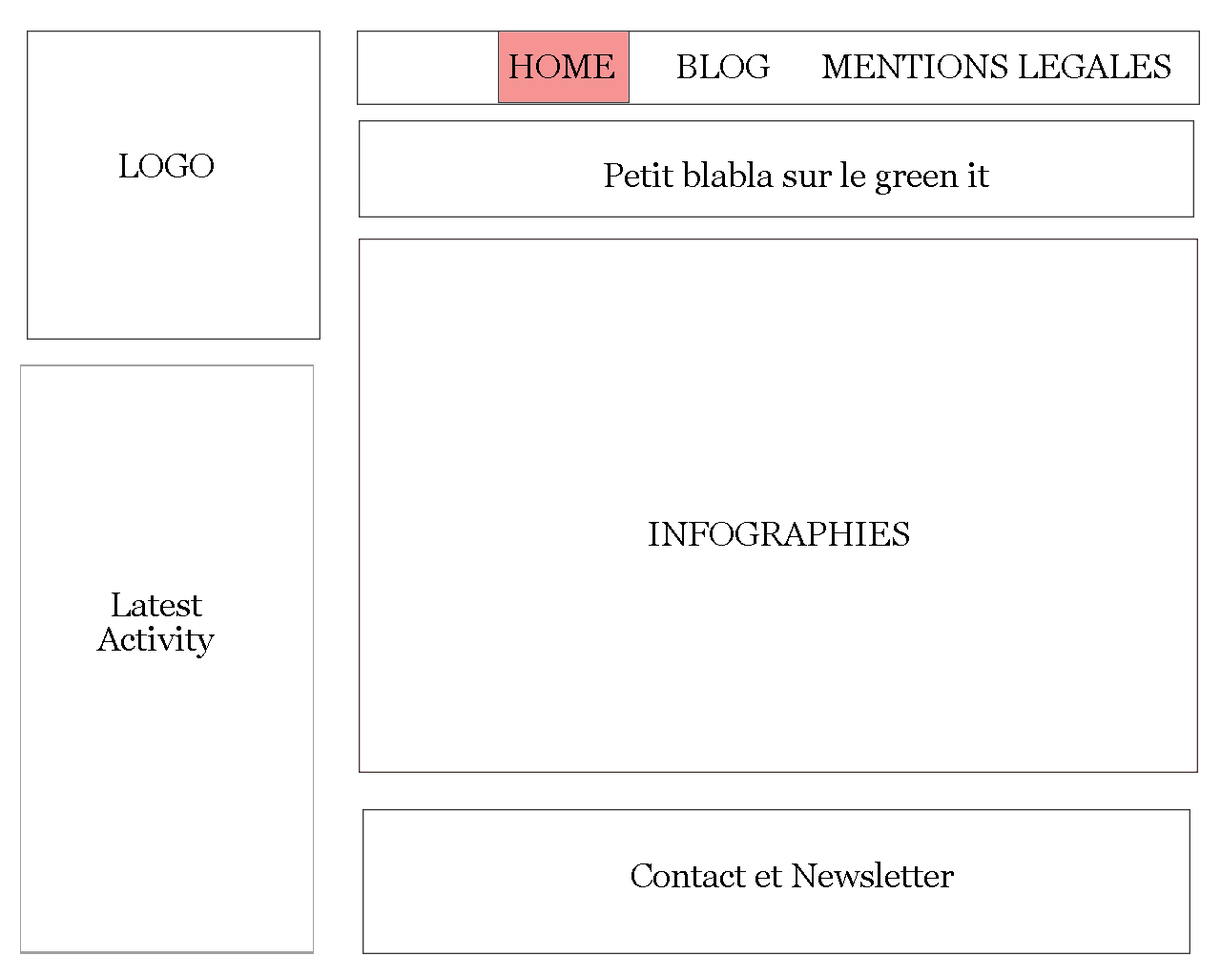
<style>
.page{position:relative;width:1221px;height:977px;background:#ffffff}
.page>*{position:absolute;margin:0}
.t1{font:34.3px "Georgia";color:#050505}
.t2{font:34.3px "Georgia";color:#030303}
.t3{font:34.3px/34.3px "Georgia";color:#030303}
</style>
<div class="page">
<p class="t1" style="left:509px;top:54px;width:661px;height:24px">HOME       BLOG      MENTIONS LEGALES</p>
<p class="t1" style="left:119px;top:154px;width:95px;height:23px">LOGO</p>
<p class="t2" style="left:604px;top:161px;width:385px;height:34px">Petit blabla sur le green it</p>
<p class="t2" style="left:649px;top:522px;width:260px;height:24px">INFOGRAPHIES</p>
<p class="t3" style="left:96px;top:592px;width:119px;height:66px;text-align:center">Latest<br>Activity</p>
<p class="t2" style="left:631px;top:861px;width:323px;height:26px">Contact et Newsletter</p>
</div>
